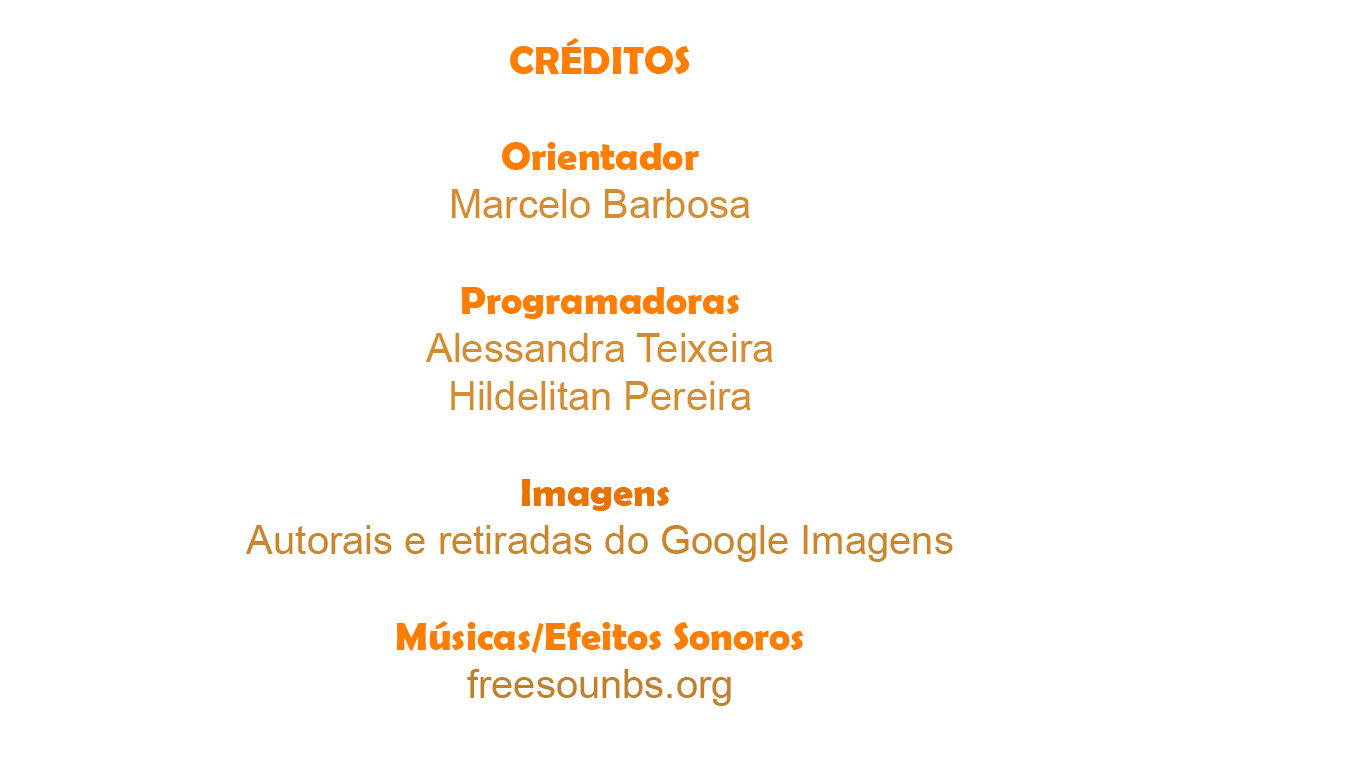
<style>
.page{position:relative;width:1366px;height:768px;background:#ffffff}
.page>*{position:absolute;margin:0}
.t1{font:40px "ArialMT";color:#d38c31}
.t2{font:40px "BerlinSansFBDemi-Bold";color:#ff7e00}
.t3{font:40px "BerlinSansFBDemi-Bold";color:#e97301}
.t4{font:40px "ArialMT";color:#ca862f}
.t5{font:40px "ArialMT";color:#c1802d}
</style>
<div class="page">
<p class="t1" style="left:246px;top:38px;width:707px;height:668px;text-align:center"><span class="t2">CRÉDITOS<br><br>Orientador<br></span>Marcelo Barbosa<br><br><span class="t2">Programadoras<br></span>Alessandra Teixeira<br>Hildelitan Pereira<br><br><span class="t3">Imagens <br></span><span class="t4">Autorais e retiradas do Google Imagens<br><br></span><span class="t2">Músicas/Efeitos Sonoros<br></span><span class="t5">freesounbs.org</span></p>
</div>
